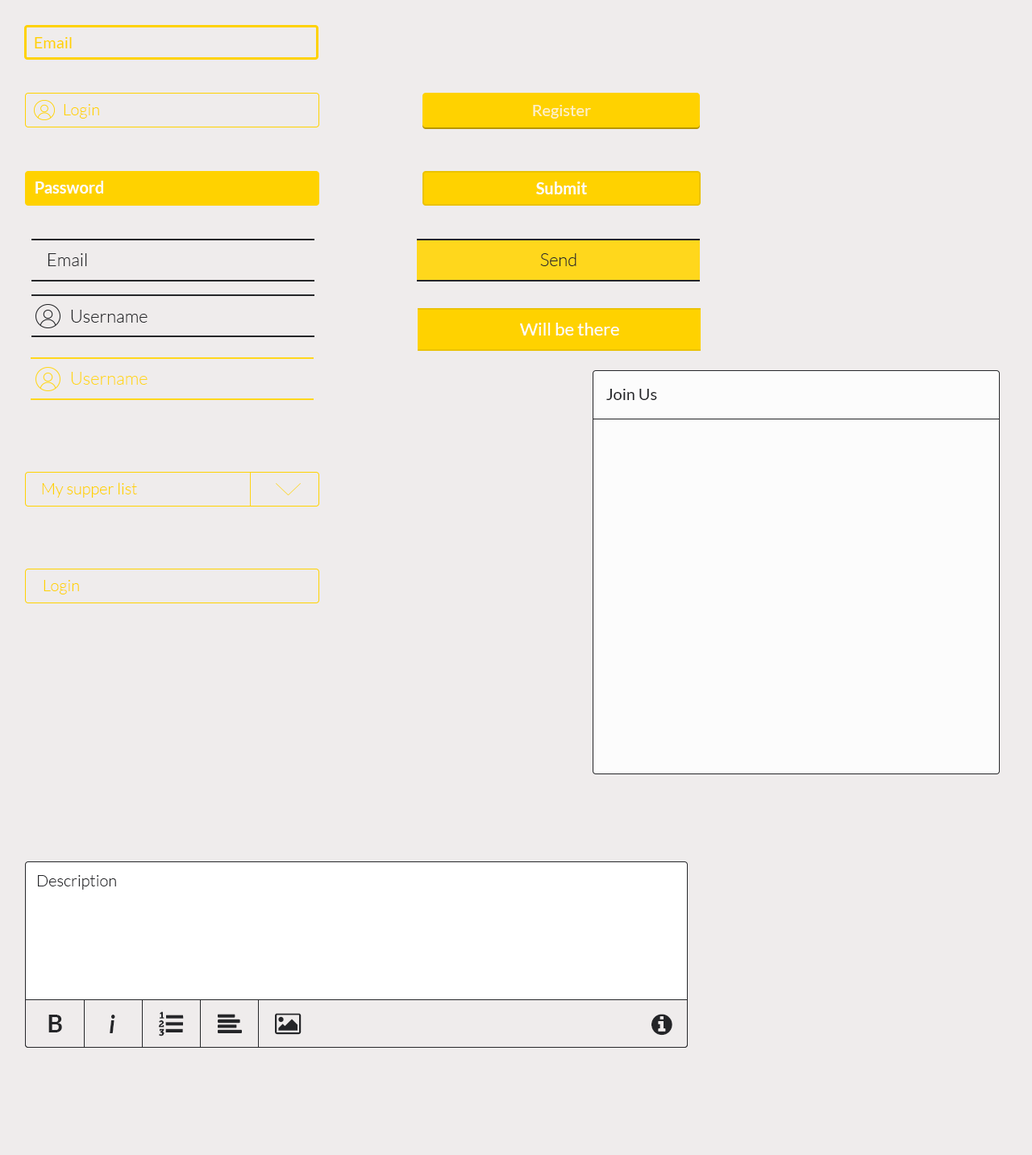
<style>
.page{position:relative;width:1032px;height:1155px;background:#efecec}
.page>*{position:absolute;margin:0}
.t1{font:16.1px "Lato-Regular";color:#ffd200}
.t2{font:16.1px "Lato-Light";color:#ffd200}
.t3{font:16.1px "Lato-Regular";color:#fdf1cb}
.t4{font:16.1px "Lato-Bold";color:#fcfcfc}
.t5{font:17.7px "Lato-Light";color:#242528}
.t6{font:17.7px "Lato-Regular";color:#fcfcfc}
.t7{font:17.7px "Lato-Light";color:#ffd71c}
.t8{font:16.1px "Lato-Regular";color:#242528}
.t9{font:16.1px "Lato-Light";color:#242528}
.t10{font:24.2px "Lato-Bold";color:#242528}
.t11{font:24.2px "Lato-BoldItalic";color:#242528}
</style>
<div class="page">
<p class="t1" style="left:35px;top:37px;width:37px;height:11px">Email</p>
<p class="t2" style="left:64px;top:104px;width:35px;height:15px">Login</p>
<p class="t3" style="left:533px;top:105px;width:58px;height:14px">Register</p>
<p class="t4" style="left:35px;top:181px;width:68px;height:13px">Password</p>
<p class="t4" style="left:536px;top:181px;width:51px;height:13px">Submit</p>
<p class="t5" style="left:48px;top:253px;width:39px;height:13px">Email</p>
<p class="t5" style="left:540px;top:253px;width:37px;height:13px">Send</p>
<p class="t5" style="left:71px;top:310px;width:77px;height:13px">Username</p>
<p class="t6" style="left:520px;top:323px;width:99px;height:13px">Will be there</p>
<p class="t7" style="left:71px;top:372px;width:77px;height:13px">Username</p>
<p class="t8" style="left:607px;top:389px;width:50px;height:11px">Join Us</p>
<p class="t2" style="left:42px;top:482px;width:95px;height:16px">My supper list</p>
<p class="t2" style="left:44px;top:580px;width:35px;height:14px">Login</p>
<p class="t9" style="left:38px;top:875px;width:78px;height:15px">Description</p>
<p class="t10" style="left:48px;top:1015px;width:14px;height:17px">B</p>
<p class="t11" style="left:110px;top:1015px;width:5px;height:18px">i</p>
</div>
